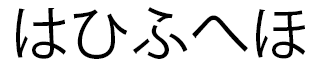
<style>
.page{position:relative;width:320px;height:64px;background:#ffffff}
.page>*{position:absolute;margin:0}
.t1{font:60px "KozGoPr6N-Regular";color:#000000}
</style>
<div class="page">
<p class="t1" style="left:16px;top:7px;width:290px;height:52px">はひふへほ</p>
</div>
